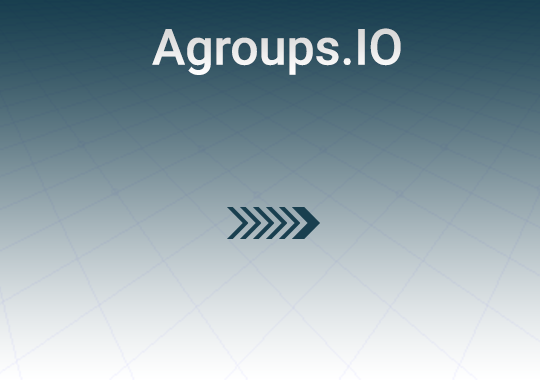
<style>
.page{position:relative;width:540px;height:380px}
.page>*{position:absolute;margin:0}
.t1{font:49.7px "Roboto-Medium";color:#eaeaea}
</style>
<div class="page">
<p class="t1" style="left:152px;top:28px;width:249px;height:47px">Agroups.IO</p>
</div>
